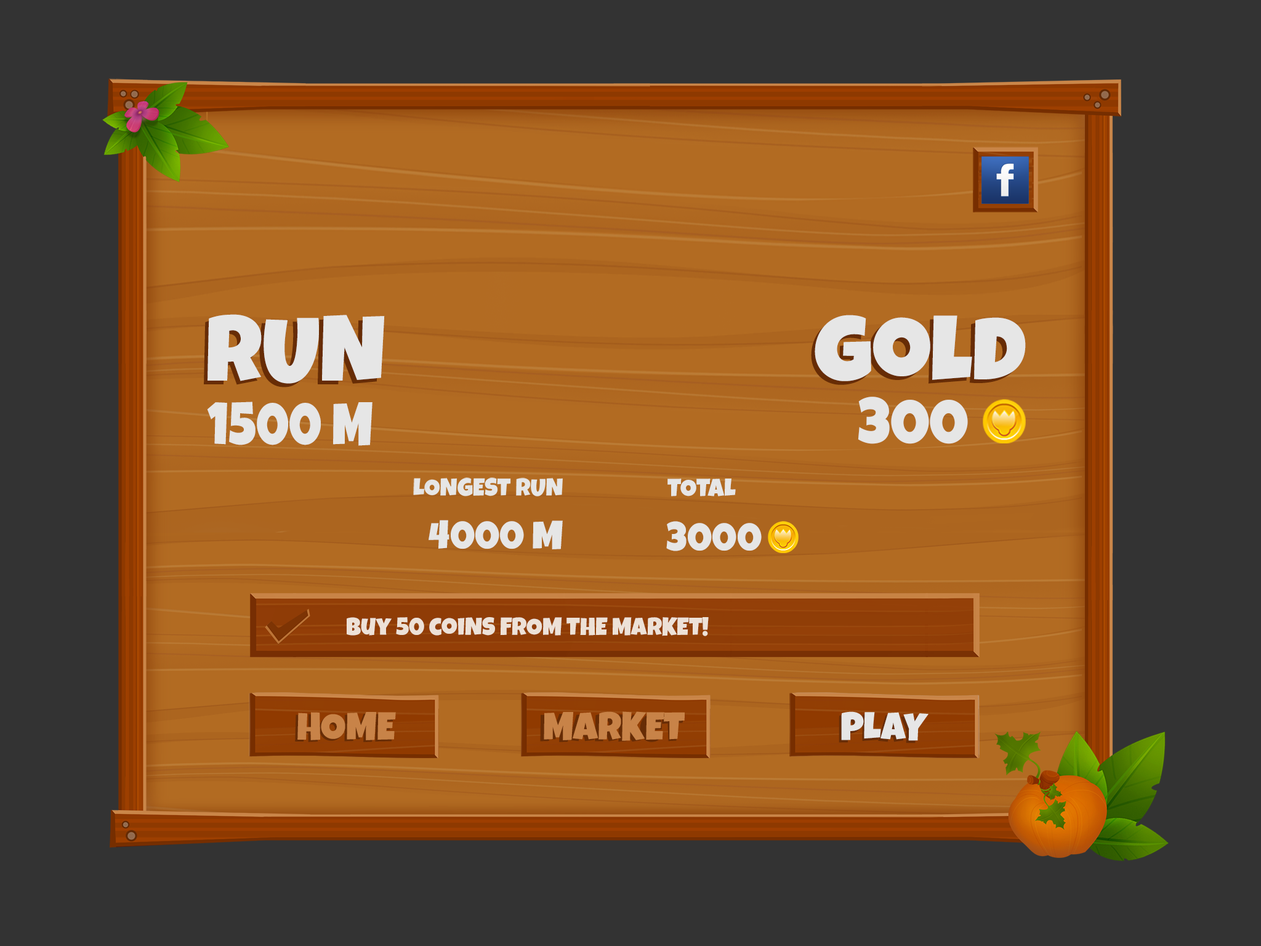
<style>
.page{position:relative;width:1261px;height:946px;background:#333333}
.page>*{position:absolute;margin:0}
.t1{font:92.9px "LuckiestGuy-Regular";color:#e6e6e6}
.t2{font:91.6px "LuckiestGuy-Regular";color:#e6e6e6}
.t3{font:59.5px "LuckiestGuy-Regular";color:#e6e6e6;scale:0.87 1}
.t4{font:61.9px "LuckiestGuy-Regular";color:#e6e6e6}
.t5{font:25.2px "LuckiestGuy-Regular";color:#e6e6e6}
.t6{font:39.3px "LuckiestGuy-Regular";color:#e6e6e6}
.t7{font:24.6px "LuckiestGuy-Regular";color:#ede1d7}
</style>
<div class="page">
<p class="t1" style="left:204px;top:318px;width:176px;height:69px">RUN</p>
<p class="t1" style="left:207px;top:314px;width:178px;height:70px">RUN</p>
<p class="t2" style="left:815px;top:315px;width:211px;height:66px">gold</p>
<p class="t2" style="left:811px;top:318px;width:210px;height:67px">gold</p>
<p class="t3" style="left:207px;top:401px;width:165px;height:45px">1500 M</p>
<p class="t4" style="left:858px;top:396px;width:110px;height:48px">300</p>
<p class="t5" style="left:667px;top:478px;width:69px;height:18px">TOTAL</p>
<p class="t6" style="left:429px;top:520px;width:134px;height:29px">4000 M</p>
<p class="t6" style="left:666px;top:521px;width:96px;height:30px">3000</p>
<p class="t7" style="left:347px;top:617px;width:362px;height:19px">Buy 50 coiNS FROM THE MARKET!</p>
</div>
